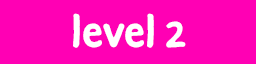
<style>
.page{position:relative;width:256px;height:64px;background:#ff00b4}
.page>*{position:absolute;margin:0}
.t1{font:48px "DuperPro-Bold";color:#ffffff}
</style>
<div class="page">
<p class="t1" style="left:73px;top:13px;width:113px;height:35px">level 2</p>
</div>
